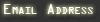
<style>
.page{position:relative;width:100px;height:22px;background:#333333}
.page>*{position:absolute;margin:0}
.t1{font:15px "OCRAExtended";color:#ffffff;font-variant:small-caps}
</style>
<div class="page">
<p class="t1" style="left:4px;top:4px;width:89px;height:10px">Email Address</p>
</div>
